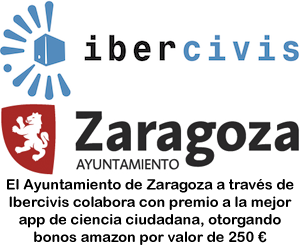
<style>
.page{position:relative;width:300px;height:247px;background:#ffffff}
.page>*{position:absolute;margin:0}
.t1{font:14.6px "ArialRoundedMTBold";color:#000000}
</style>
<div class="page">
<p class="t1" style="left:7px;top:179px;width:287px;height:66px;text-align:center">El Ayuntamiento de Zaragoza a través de Ibercivis colabora con premio a la mejor app de ciencia ciudadana, otorgando bonos amazon por valor de 250 €</p>
</div>
